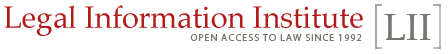
<style>
.page{position:relative;width:448px;height:54px;background:#ffffff}
.page>*{position:absolute;margin:0}
.t1{font:30.5px "Palatino-Roman";letter-spacing:-0.005em;color:#b31b1b}
.t2{font:36.5px "Palatino-Roman";letter-spacing:0.01em;color:#68645a}
.t3{font:10px "MyriadPro-Regular";letter-spacing:0.1em;color:#7a766d;text-transform:uppercase}
</style>
<div class="page">
<p class="t1" style="left:4px;top:5px;width:359px;height:31px">Legal Information Institute</p>
<p class="t2" style="left:384px;top:14px;width:47px;height:26px">LII</p>
<p class="t2" style="left:384px;top:14px;width:47px;height:26px">LII</p>
<p class="t3" style="left:190px;top:34px;width:172px;height:7px">OPEN ACCESS TO LAW SINCE 1992</p>
</div>
